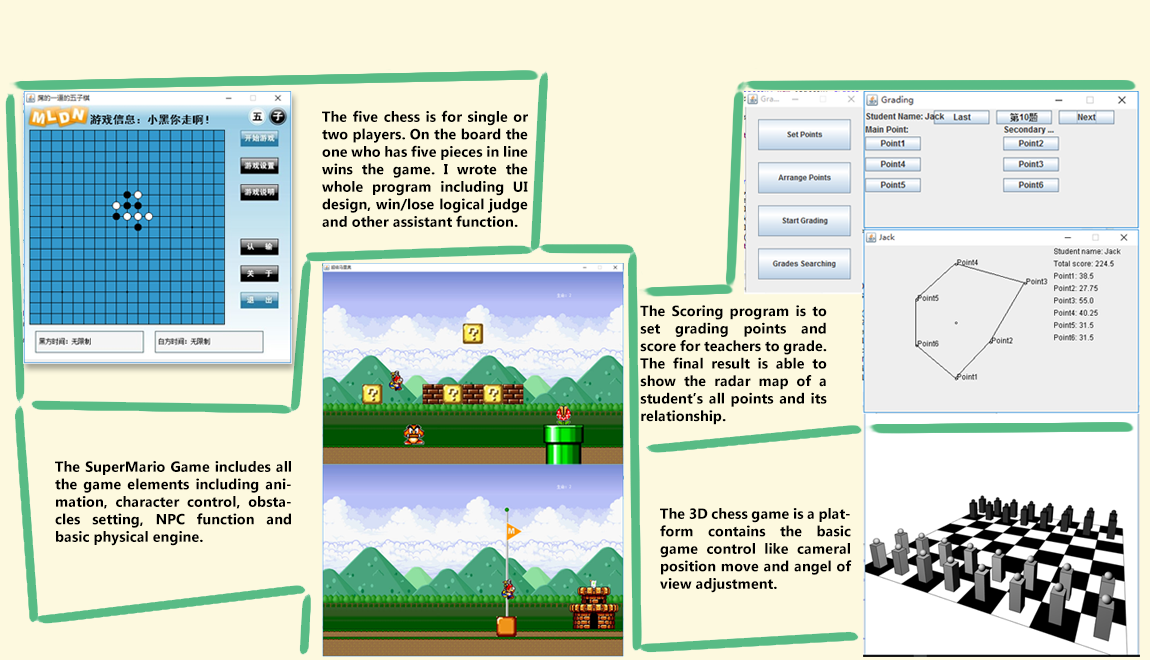
<style>
.page{position:relative;width:1150px;height:660px;background:#fdf9df}
.page>*{position:absolute;margin:0}
.t1{font:14.6px "MyanmarText-Bold";color:#000000}
</style>
<div class="page">
<p class="t1" style="left:322px;top:110px;width:206px;height:117px;text-align:justify">The five chess is for single or two players. On the board the one who has five pieces in line wins the game. I wrote the whole program including UI design, win/lose logical judge and other assistant function.</p>
<p class="t1" style="left:640px;top:305px;width:187px;height:120px;text-align:justify">The Scoring program is to set grading points and score for teachers to grade. The final result is able to show the radar map of a student’s all points and its relationship.</p>
<p class="t1" style="left:55px;top:461px;width:236px;height:85px;text-align:justify">The SuperMario Game includes all the game elements including animation, character control, obstacles setting, NPC function and basic physical engine.</p>
<p class="t1" style="left:660px;top:508px;width:192px;height:85px;text-align:justify">The 3D chess game is a platform contains the basic game control like cameral position move and angel of view adjustment.</p>
</div>
